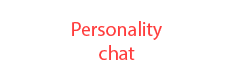
<style>
.page{position:relative;width:240px;height:80px;background:#ffffff}
.page>*{position:absolute;margin:0}
.t1{font:20px "MyriadPro-Regular";color:#ff3c3c}
</style>
<div class="page">
<p class="t1" style="left:72px;top:21px;width:90px;height:39px;text-align:center">Personality<br>chat</p>
</div>
